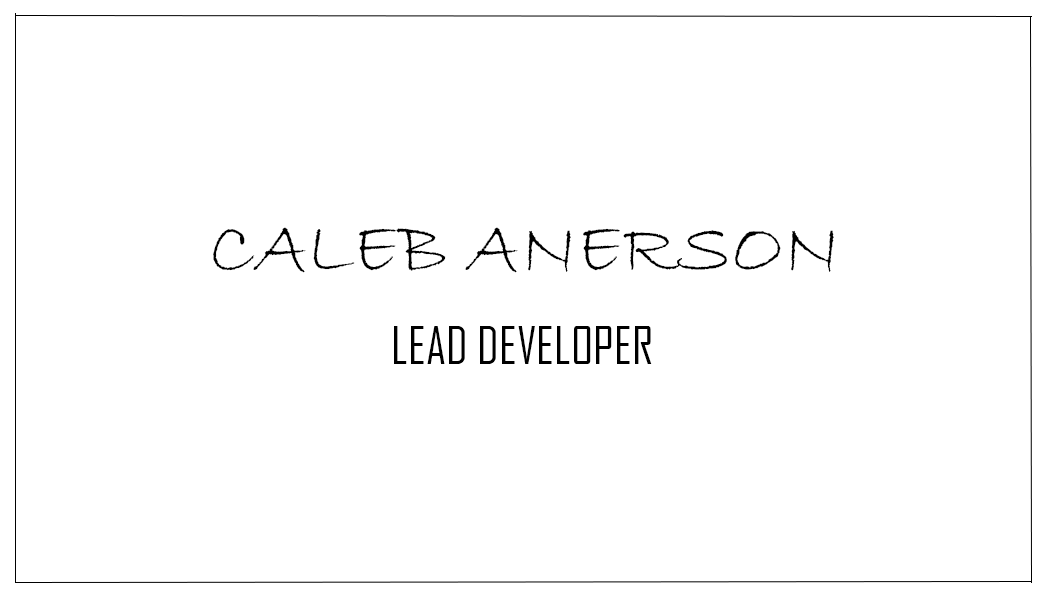
<style>
.page{position:relative;width:1050px;height:600px;background:#ffffff}
.page>*{position:absolute;margin:0}
.t1{font:75px "BradleyHandITC";color:#000000}
.t2{font:12px "AgencyFB-Reg";color:#000000}
</style>
<div class="page">
<p class="t1" style="left:213px;top:227px;width:621px;height:46px">CALEB ANERSON</p>
<p class="t2" style="left:394px;top:326px;width:258px;height:38px">LEAD DEVELOPER</p>
</div>
